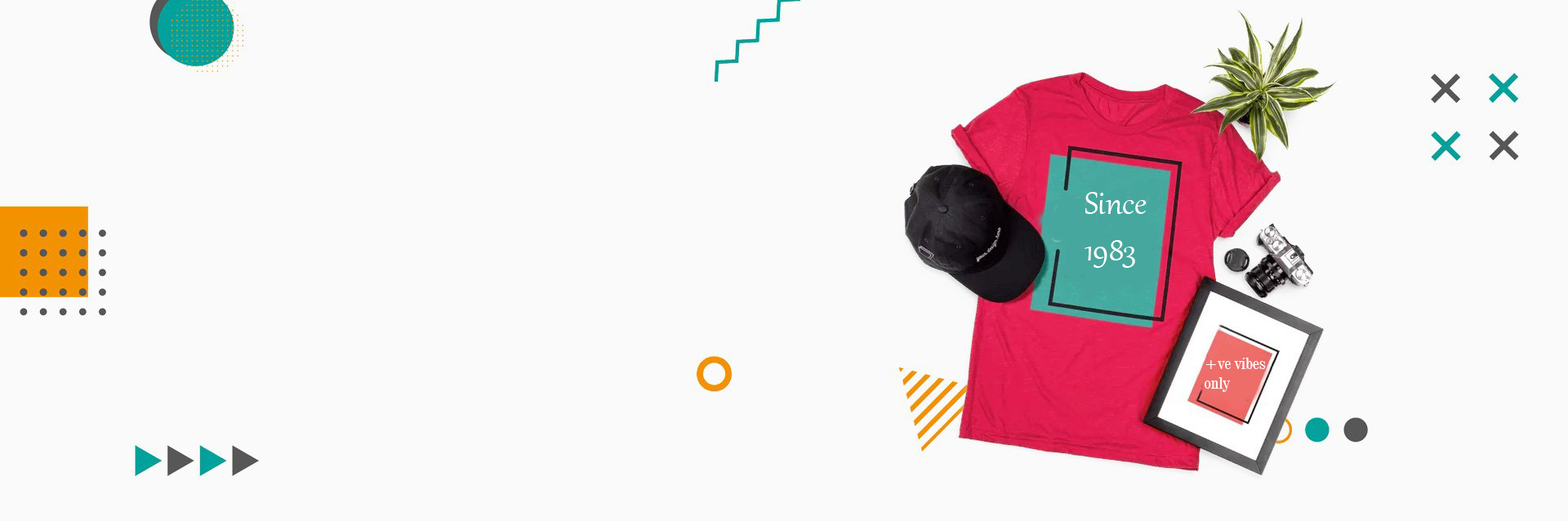
<style>
.page{position:relative;width:1568px;height:521px;background:#fafafa}
.page>*{position:absolute;margin:0}
.t1{font:39.2px "Gabriola";color:#ffffff}
.t2{font:16.3px "Century725BT-RomanCondensed";color:#ffffff}
</style>
<div class="page">
<p class="t1" style="left:1085px;top:192px;width:62px;height:76px">Since<br>1983</p>
<p class="t2" style="left:1205px;top:358px;width:61px;height:34px">+ve vibes <br>only</p>
</div>
